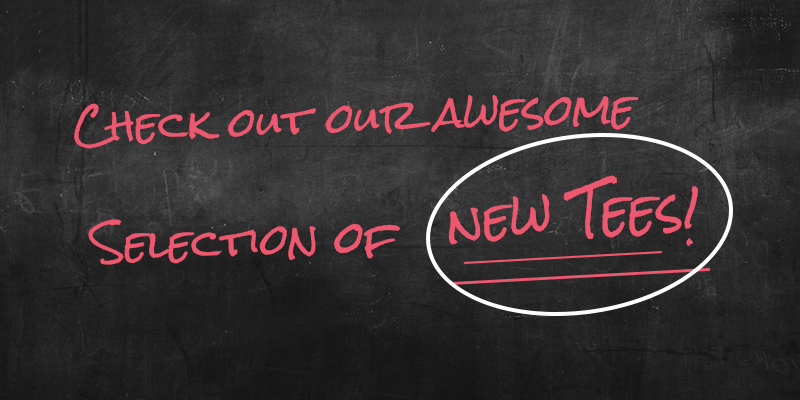
<style>
.page{position:relative;width:800px;height:400px}
.page>*{position:absolute;margin:0}
.t1{font:40px "RockSalt";color:#eb586f}
.t2{font:45.3px "RockSalt";color:#eb586f}
.t3{font:41.3px "RockSalt";color:#eb586f}
.t4{font:42.7px "RockSalt";color:#eb586f}
</style>
<div class="page">
<p class="t1" style="left:74px;top:94px;width:565px;height:55px">Check out our awesome</p>
<p class="t2" style="left:448px;top:175px;width:250px;height:71px;rotate:-2deg">new Tees!</p>
<p class="t1" style="left:88px;top:219px;width:312px;height:46px">Selecti<span class="t3">o</span>n <span class="t4">of</span></p>
</div>
